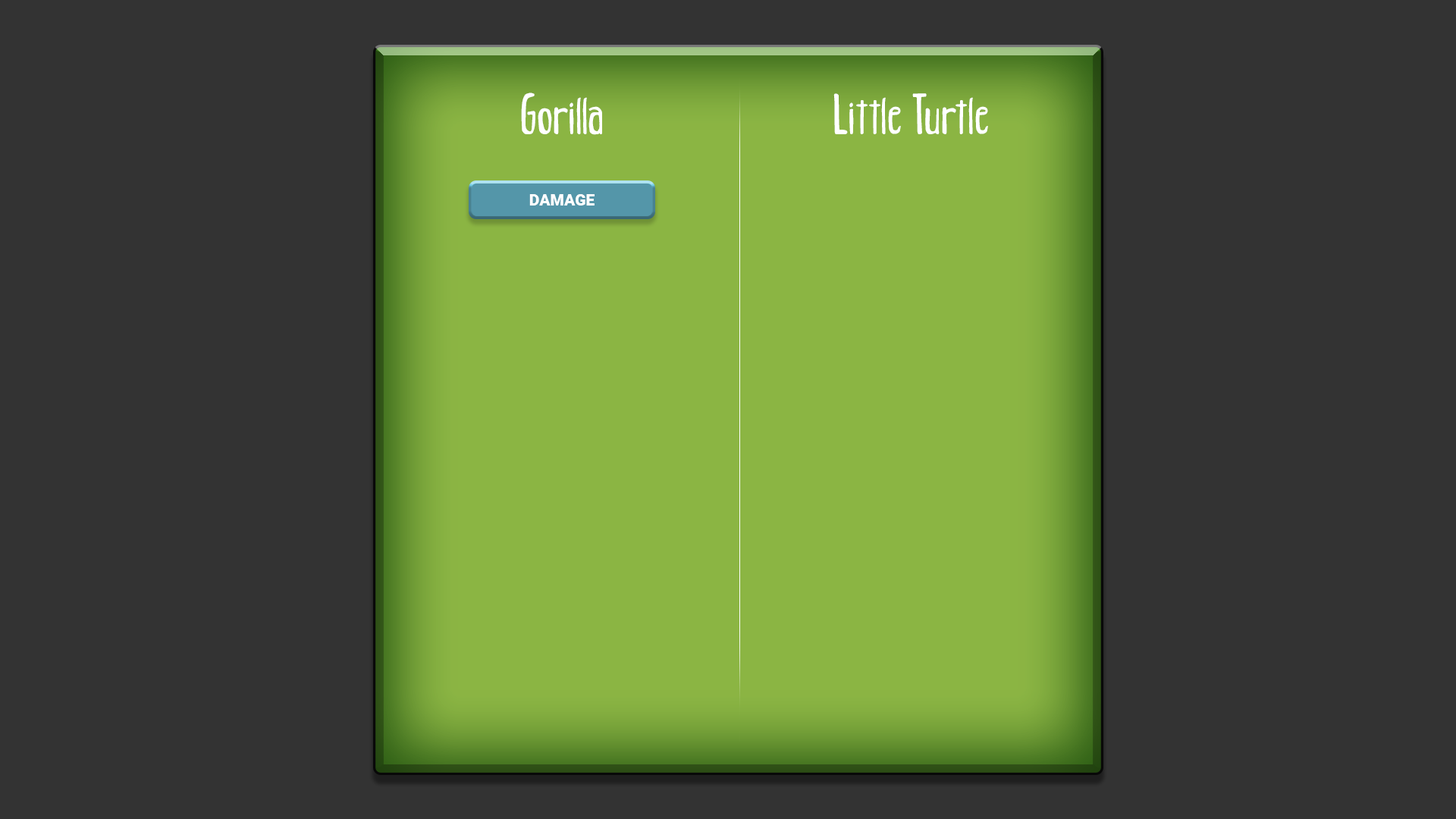
<style>
.page{position:relative;width:1456px;height:819px;background:#333333}
.page>*{position:absolute;margin:0}
.t1{font:39.4px "JungleRegular";color:#ffffff}
.t2{font:15.9px "Roboto-Black";color:#ffffff}
</style>
<div class="page">
<p class="t1" style="left:521px;top:93px;width:81px;height:42px">Gorilla</p>
<p class="t1" style="left:833px;top:93px;width:155px;height:41px">Little Turtle</p>
<p class="t2" style="left:529px;top:194px;width:66px;height:12px">DAMAGE</p>
</div>
